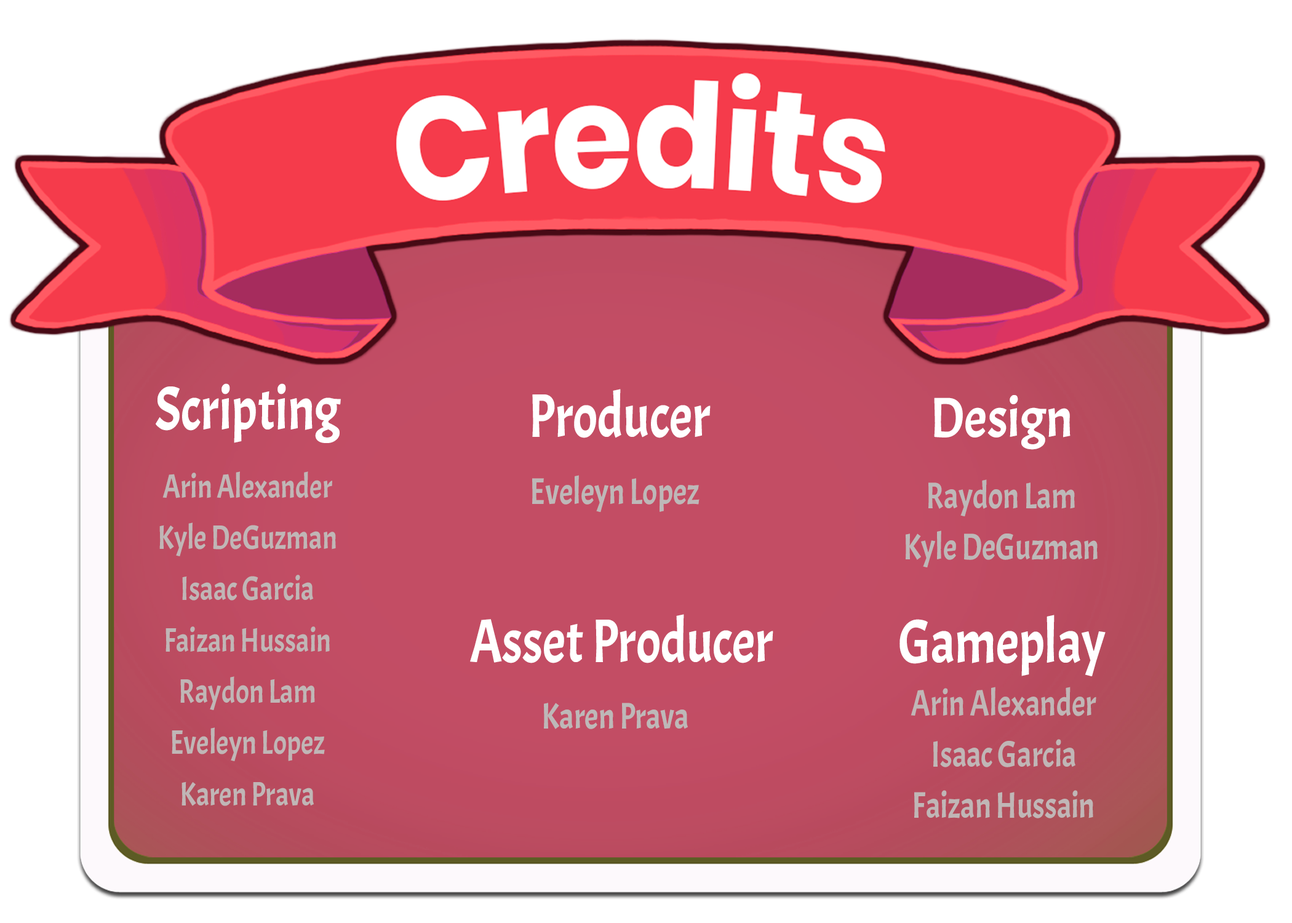
<style>
.page{position:relative;width:1292px;height:923px;background:#ffffff}
.page>*{position:absolute;margin:0}
.t1{font:61.5px "Acme-Regular";color:#ffffff;scale:0.83 1}
.t2{font:56.4px "Acme-Regular";color:#ffffff;scale:0.91 1}
.t3{font:33.8px/51.3px "Acme-Regular";color:#c0b6b6;scale:0.83 1}
.t4{font:36.9px "Acme-Regular";color:#c0b6b6;scale:0.83 1}
.t5{font:36.9px/51.3px "Acme-Regular";color:#c0b6b6;scale:0.83 1}
</style>
<div class="page">
<p class="t1" style="left:156px;top:383px;width:185px;height:60px">Scripting</p>
<p class="t1" style="left:532px;top:389px;width:179px;height:49px">Producer</p>
<p class="t2" style="left:934px;top:395px;width:137px;height:55px">Design</p>
<p class="t3" style="left:159px;top:471px;width:177px;height:335px;text-align:center">Arin Alexander<br>Kyle DeGuzman<br>Isaac Garcia<br>Faizan Hussain<br>Raydon Lam<br>Eveleyn Lopez<br>Karen Prava</p>
<p class="t4" style="left:532px;top:475px;width:168px;height:38px">Eveleyn Lopez</p>
<p class="t5" style="left:906px;top:479px;width:192px;height:89px;text-align:center">Raydon Lam<br>Kyle DeGuzman</p>
<p class="t1" style="left:470px;top:614px;width:303px;height:49px">Asset Producer</p>
<p class="t1" style="left:900px;top:615px;width:206px;height:61px">Gameplay</p>
<p class="t5" style="left:911px;top:687px;width:185px;height:131px;text-align:center">Arin Alexander<br>Isaac Garcia<br>Faizan Hussain</p>
<p class="t4" style="left:544px;top:703px;width:144px;height:26px">Karen Prava</p>
</div>
